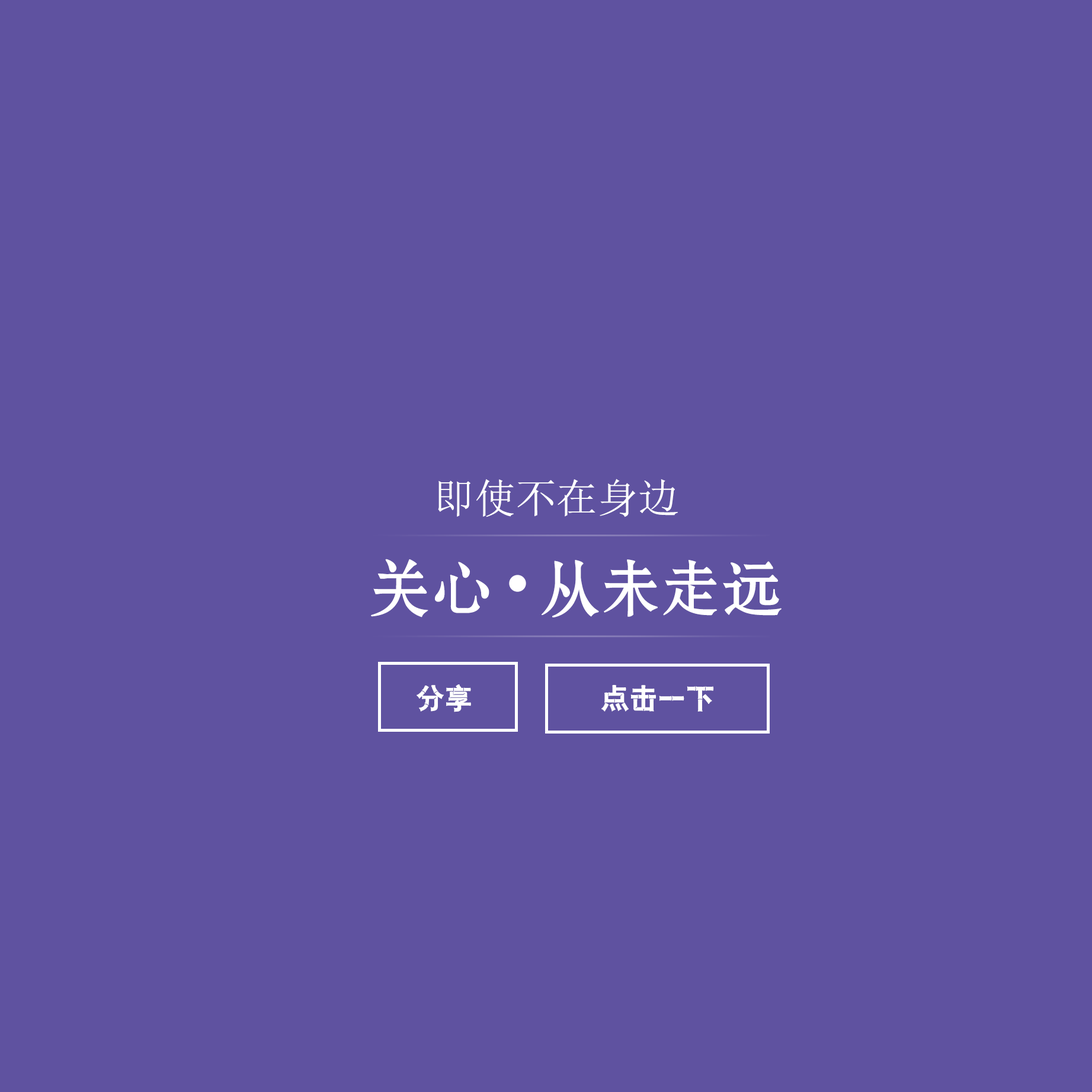
<style>
.page{position:relative;width:1092px;height:1092px;background:#5f52a0}
.page>*{position:absolute;margin:0}
.t1{font:40.6px "SimSun";color:#ffffff;text-transform:uppercase}
.t2{font:61.3px "FZSHJW--GB1-0";color:#ffffff;text-transform:uppercase}
.t3{font:28.4px "HYq1gj";color:#ffffff;text-transform:uppercase}
</style>
<div class="page">
<p class="t1" style="left:438px;top:479px;width:240px;height:38px">即使不在身边</p>
<p class="t2" style="left:371px;top:559px;width:411px;height:58px">关心   从未走远</p>
<p class="t3" style="left:417px;top:684px;width:54px;height:28px">分享</p>
<p class="t3" style="left:601px;top:685px;width:113px;height:27px">点击一下</p>
</div>
